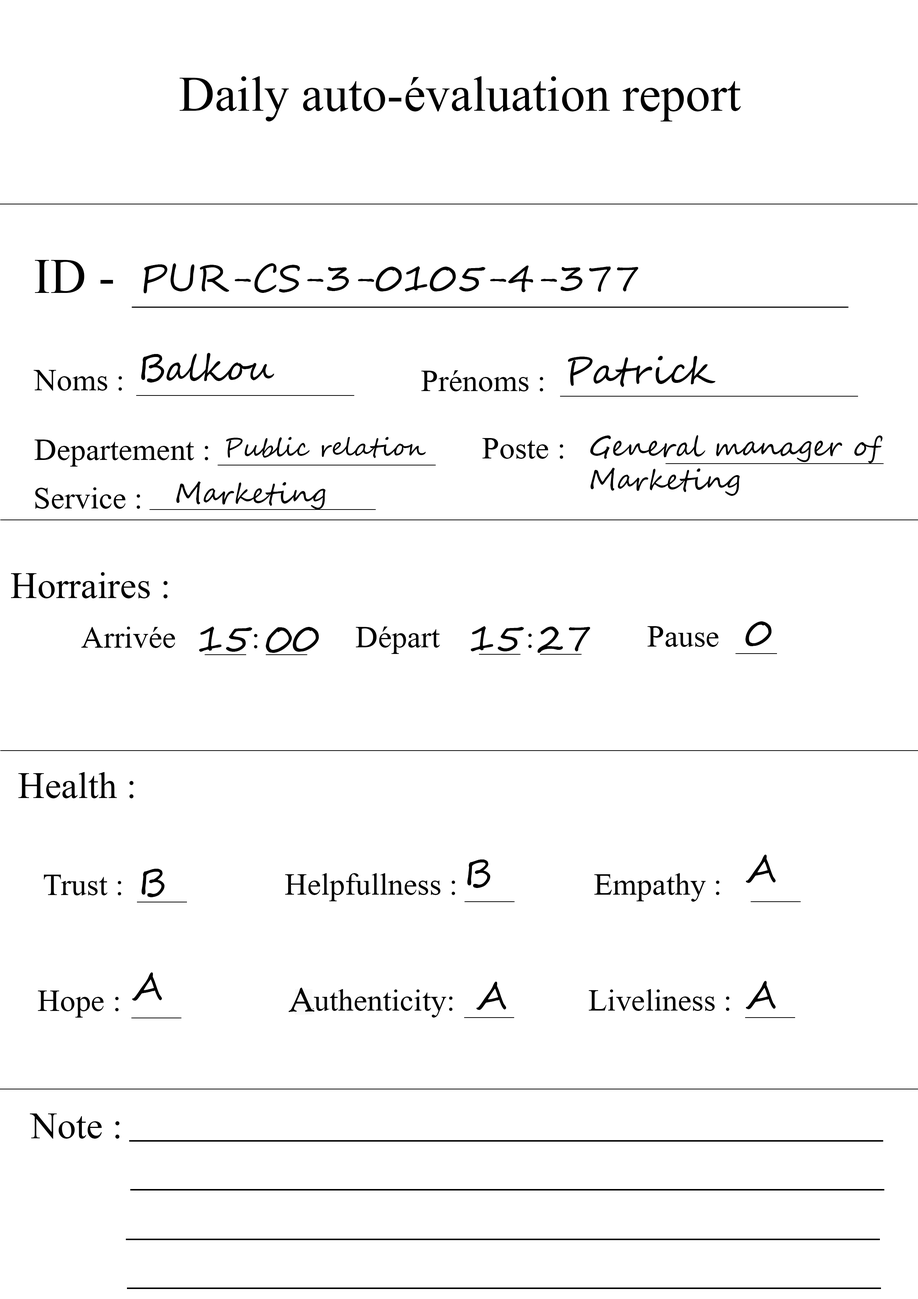
<style>
.page{position:relative;width:918px;height:1299px;background:#ffffff}
.page>*{position:absolute;margin:0}
.t1{font:74px "Microsoft-Himalaya";color:#000000}
.t2{font:37px "SegoeScript";color:#000000}
.t3{font:46.3px "Microsoft-Himalaya";color:#000000}
.t4{font:24.7px "SegoeScript";color:#000000}
.t5{font:27.8px "SegoeScript";color:#000000}
.t6{font:55.5px "Microsoft-Himalaya";color:#000000}
.t7{font:37px "HighTowerText-Reg";color:#000000}
</style>
<div class="page">
<p class="t1" style="left:180px;top:76px;width:561px;height:45px">Daily auto-évaluation report</p>
<p class="t1" style="left:35px;top:260px;width:78px;height:33px">ID -</p>
<p class="t2" style="left:143px;top:263px;width:496px;height:30px">PUR-CS-3-0105-4-377</p>
<p class="t2" style="left:141px;top:353px;width:133px;height:29px">Balkou</p>
<p class="t2" style="left:568px;top:356px;width:148px;height:31px">Patrick</p>
<p class="t3" style="left:34px;top:370px;width:88px;height:21px">Noms :</p>
<p class="t3" style="left:421px;top:370px;width:122px;height:21px">Prénoms :</p>
<p class="t4" style="left:226px;top:437px;width:200px;height:21px">Public relation</p>
<p class="t3" style="left:482px;top:438px;width:81px;height:21px">Poste :</p>
<p class="t5" style="left:590px;top:435px;width:293px;height:61px">General manager of<br>Marketing</p>
<p class="t3" style="left:34px;top:439px;width:174px;height:27px">Departement :</p>
<p class="t5" style="left:176px;top:481px;width:150px;height:28px">Marketing</p>
<p class="t3" style="left:35px;top:487px;width:105px;height:22px">Service :</p>
<p class="t6" style="left:11px;top:572px;width:157px;height:26px">Horraires :</p>
<p class="t3" style="left:81px;top:626px;width:94px;height:22px">Arrivée</p>
<p class="t2" style="left:199px;top:626px;width:120px;height:27px">15 00</p>
<p class="t3" style="left:356px;top:626px;width:84px;height:28px">Départ</p>
<p class="t2" style="left:471px;top:626px;width:120px;height:27px">15 27</p>
<p class="t3" style="left:648px;top:626px;width:71px;height:21px">Pause</p>
<p class="t2" style="left:746px;top:621px;width:26px;height:25px">0</p>
<p class="t3" style="left:254px;top:634px;width:4px;height:14px">:</p>
<p class="t3" style="left:528px;top:633px;width:4px;height:15px">:</p>
<p class="t6" style="left:18px;top:772px;width:116px;height:26px">Health :</p>
<p class="t2" style="left:746px;top:854px;width:30px;height:29px">A</p>
<p class="t2" style="left:141px;top:869px;width:24px;height:28px">B</p>
<p class="t2" style="left:467px;top:859px;width:24px;height:29px">B</p>
<p class="t3" style="left:44px;top:874px;width:77px;height:21px">Trust :</p>
<p class="t3" style="left:285px;top:873px;width:170px;height:28px">Helpfullness :</p>
<p class="t3" style="left:594px;top:873px;width:126px;height:28px">Empathy :</p>
<p class="t2" style="left:132px;top:972px;width:30px;height:29px">A</p>
<p class="t7" style="left:288px;top:987px;width:27px;height:25px">A</p>
<p class="t3" style="left:301px;top:989px;width:152px;height:28px">authenticity:</p>
<p class="t2" style="left:476px;top:981px;width:30px;height:29px">A</p>
<p class="t3" style="left:589px;top:989px;width:141px;height:22px">Liveliness :</p>
<p class="t2" style="left:746px;top:981px;width:30px;height:28px">A</p>
<p class="t3" style="left:38px;top:990px;width:81px;height:27px">Hope :</p>
<p class="t6" style="left:30px;top:1113px;width:90px;height:25px">Note :</p>
</div>
